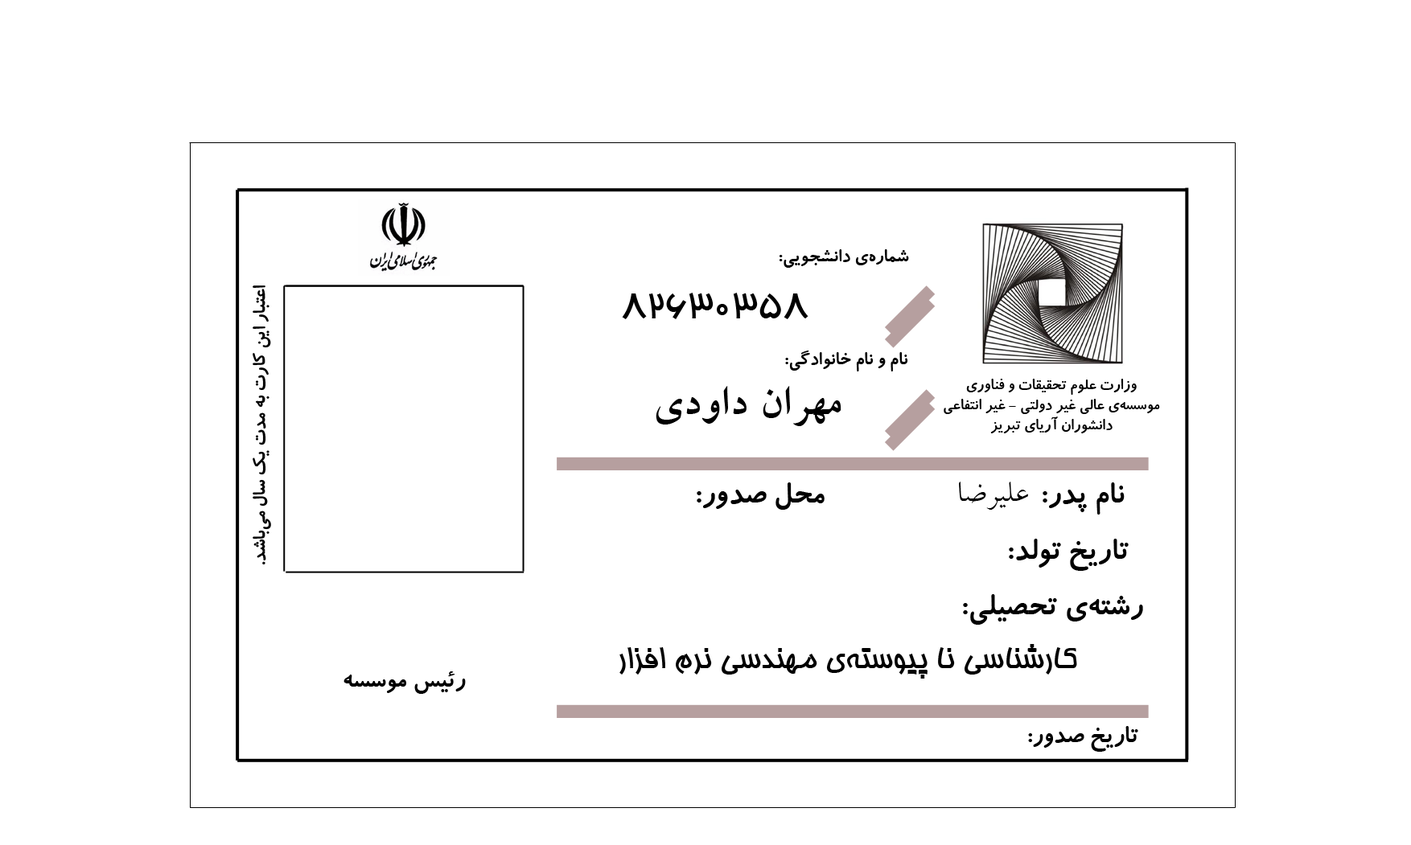
<style>
.page{position:relative;width:1411px;height:845px;background:#ffffff}
.page>*{position:absolute;margin:0}
.t1{font:20.1px "BKoodakBold";color:#000000}
.t2{font:40.2px "BHoma";color:#000000}
.t3{font:46.9px "BLotusBold";color:#000000}
.t4{font:16.8px "BKoodakBold";color:#000000}
.t5{font:33.5px "BKoodakBold";color:#000000}
.t6{font:33.5px "BLotus";color:#000000}
.t7{font:33.5px "BHoma";color:#000000}
.t8{font:26.8px "BKoodakBold";color:#000000}
</style>
<div class="page">
<p class="t1" style="left:779px;top:249px;width:130px;height:19px">شماره‌ي دانشجويي:</p>
<p class="t1" style="left:253px;top:286px;width:18px;height:279px;rotate:-90deg">اعتبار اين کارت به مدت يک سال مي‌باشد.</p>
<p class="t2" style="left:622px;top:293px;width:186px;height:26px">82630358</p>
<p class="t1" style="left:785px;top:351px;width:123px;height:21px">نام و نام خانوادگي:</p>
<p class="t3" style="left:655px;top:386px;width:186px;height:40px">مهران داودي</p>
<p class="t4" style="left:943px;top:379px;width:217px;height:55px;text-align:center">وزارت علوم تحقيقات و فناوري<br>موسسه‌ي عالي غير دولتي - غير انتفاعي<br>دانشوران آرياي تبريز</p>
<p class="t5" style="left:696px;top:483px;width:128px;height:27px">محل صدور:</p>
<p class="t6" style="left:959px;top:482px;width:69px;height:28px">عليرضا</p>
<p class="t5" style="left:1042px;top:483px;width:82px;height:32px">نام پدر:</p>
<p class="t5" style="left:1009px;top:539px;width:119px;height:32px">تاريخ تولد:</p>
<p class="t5" style="left:963px;top:594px;width:180px;height:31px">رشته‌ي تحصيلي:</p>
<p class="t7" style="left:619px;top:644px;width:458px;height:35px">کارشناسي نا پيوسته‌ي مهندسي نرم افزار</p>
<p class="t8" style="left:343px;top:672px;width:123px;height:22px">رئيس موسسه</p>
<p class="t8" style="left:1028px;top:726px;width:110px;height:26px">تاريخ صدور:</p>
</div>
